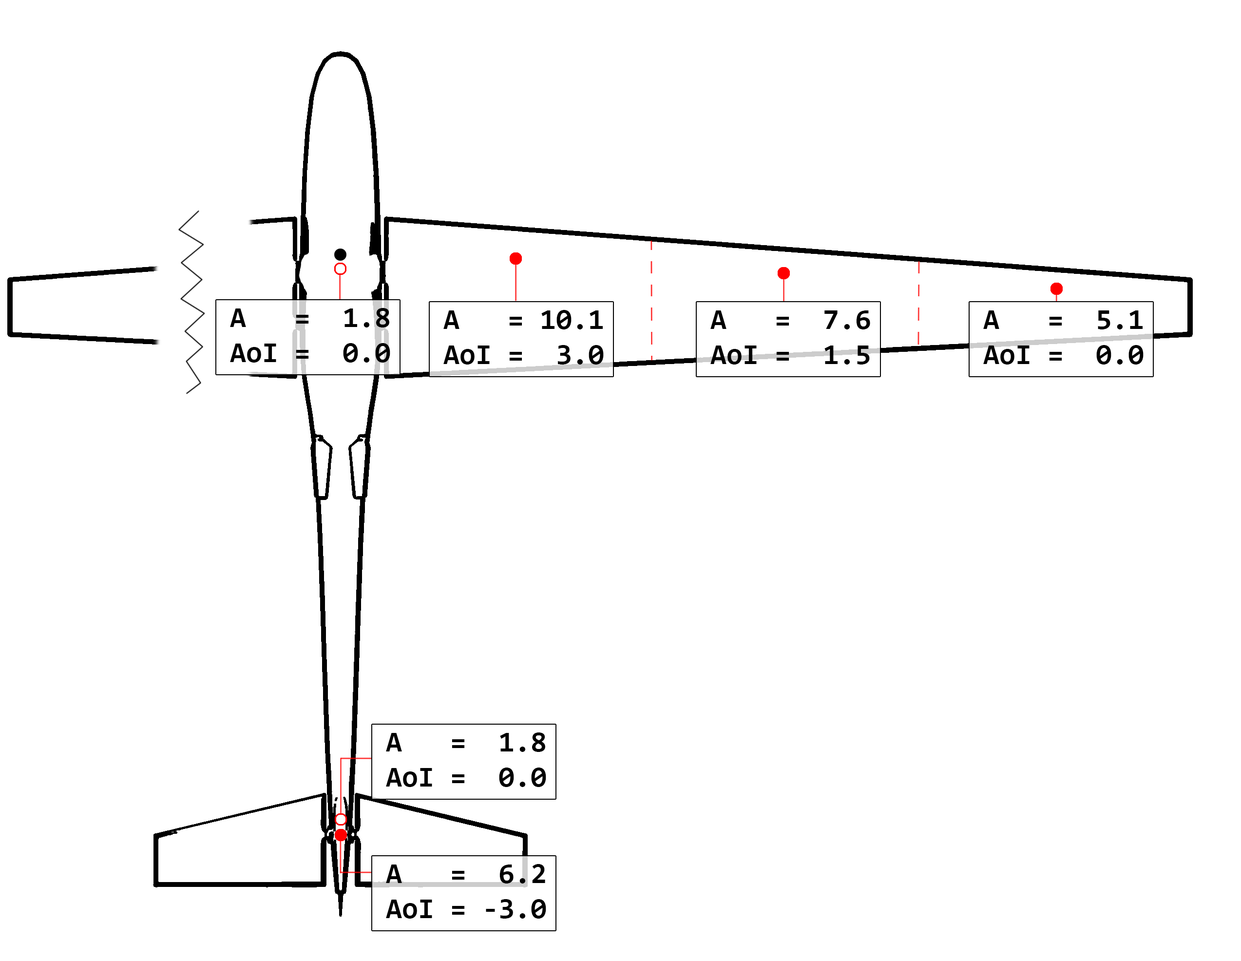
<style>
.page{position:relative;width:1241px;height:961px;background:#ffffff}
.page>*{position:absolute;margin:0}
.t1{font:29.2px "Consolas-Bold";color:#000000}
</style>
<div class="page">
<p class="t1" style="left:230px;top:308px;width:160px;height:55px">A   =  1.8<br>AoI =  0.0</p>
<p class="t1" style="left:443px;top:310px;width:161px;height:54px">A   = 10.1<br>AoI =  3.0</p>
<p class="t1" style="left:710px;top:310px;width:160px;height:54px">A   =  7.6<br>AoI =  1.5</p>
<p class="t1" style="left:983px;top:310px;width:161px;height:54px">A   =  5.1<br>AoI =  0.0</p>
<p class="t1" style="left:386px;top:732px;width:160px;height:55px">A   =  1.8<br>AoI =  0.0</p>
<p class="t1" style="left:386px;top:864px;width:160px;height:54px">A   =  6.2<br>AoI = -3.0</p>
</div>
